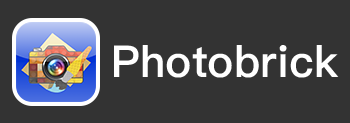
<style>
.page{position:relative;width:350px;height:123px;background:#333333}
.page>*{position:absolute;margin:0}
.t1{font:44px "PingFangSC-Semibold";color:#ffffff}
</style>
<div class="page">
<p class="t1" style="left:114px;top:45px;width:225px;height:33px">Photobrick</p>
</div>
